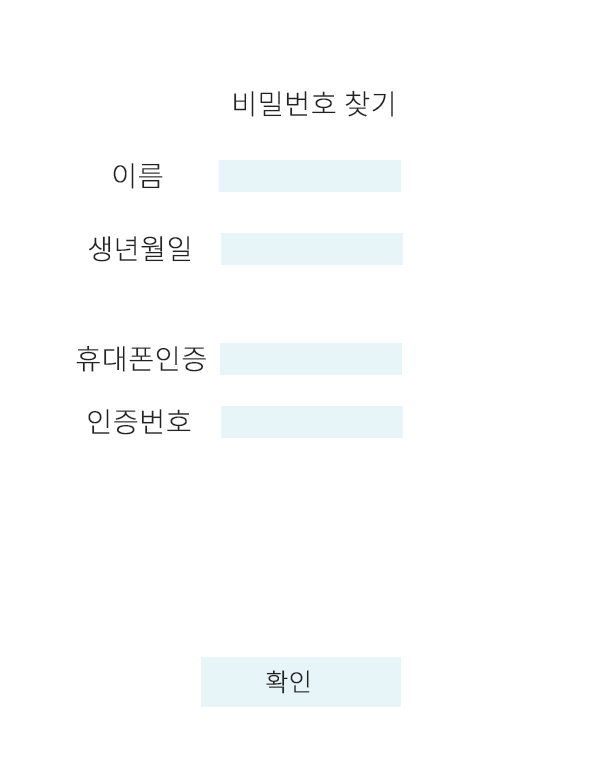
<style>
.page{position:relative;width:600px;height:768px;background:#ffffff}
.page>*{position:absolute;margin:0}
.t1{font:28px "NotoSansKR-Thin";color:#222222;font-weight:bold}
.t2{font:25px "NotoSansKR-Thin";color:#222222;font-weight:bold}
</style>
<div class="page">
<p class="t1" style="left:234px;top:90px;width:159px;height:27px">비밀번호 찾기</p>
<p class="t1" style="left:113px;top:163px;width:50px;height:26px">이름</p>
<p class="t1" style="left:89px;top:236px;width:102px;height:26px">생년월일</p>
<p class="t1" style="left:76px;top:345px;width:130px;height:27px">휴대폰인증</p>
<p class="t1" style="left:88px;top:409px;width:103px;height:26px">인증번호</p>
<p class="t2" style="left:266px;top:670px;width:44px;height:24px">확인</p>
</div>
